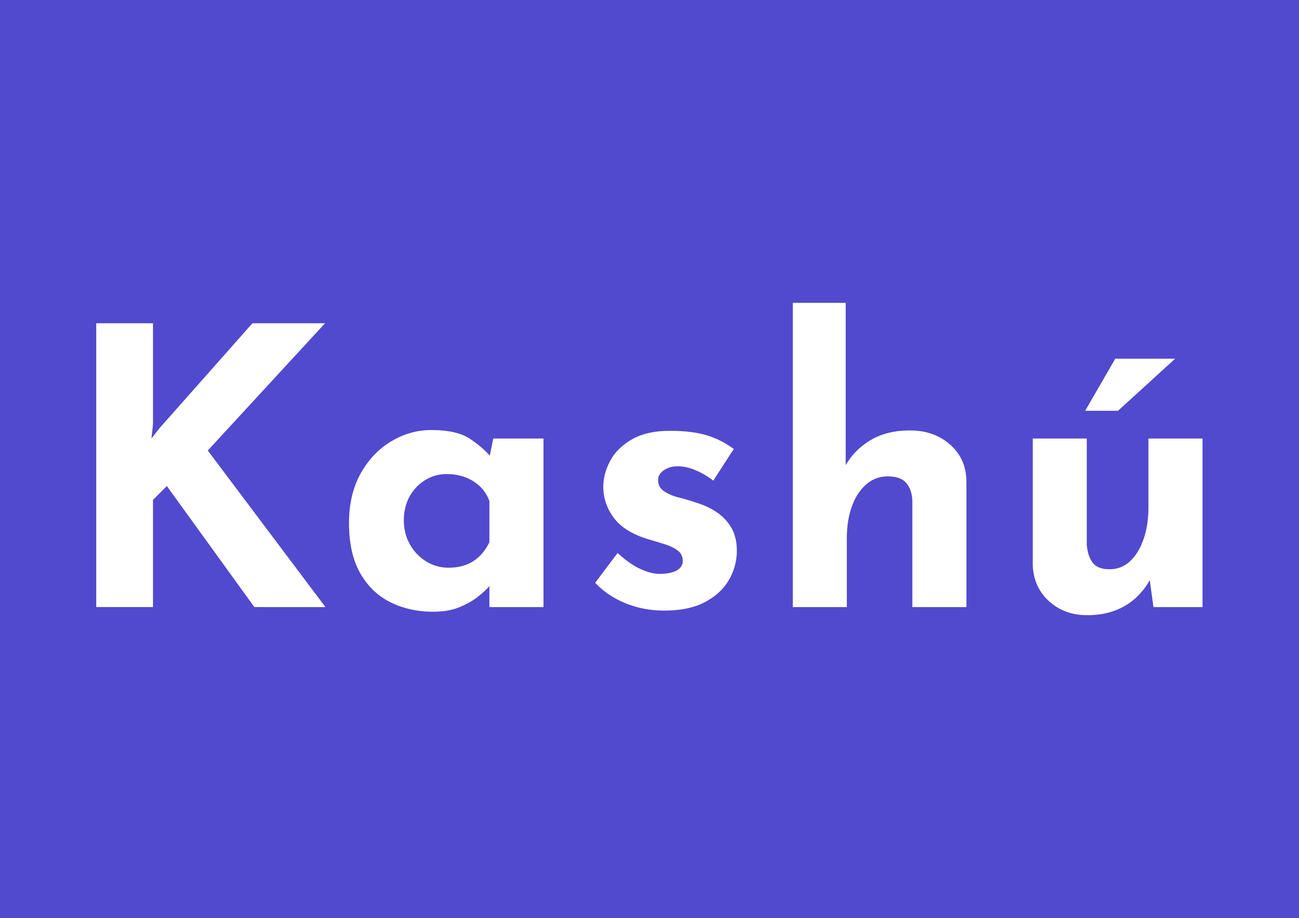
<style>
.page{position:relative;width:1299px;height:918px;background:#514ace}
.page>*{position:absolute;margin:0}
.t1{font:385.6px "JosefinSans-Bold";letter-spacing:0.028em;color:#ffffff}
</style>
<div class="page">
<p class="t1" style="left:96px;top:303px;width:1106px;height:312px">Kashú</p>
</div>
